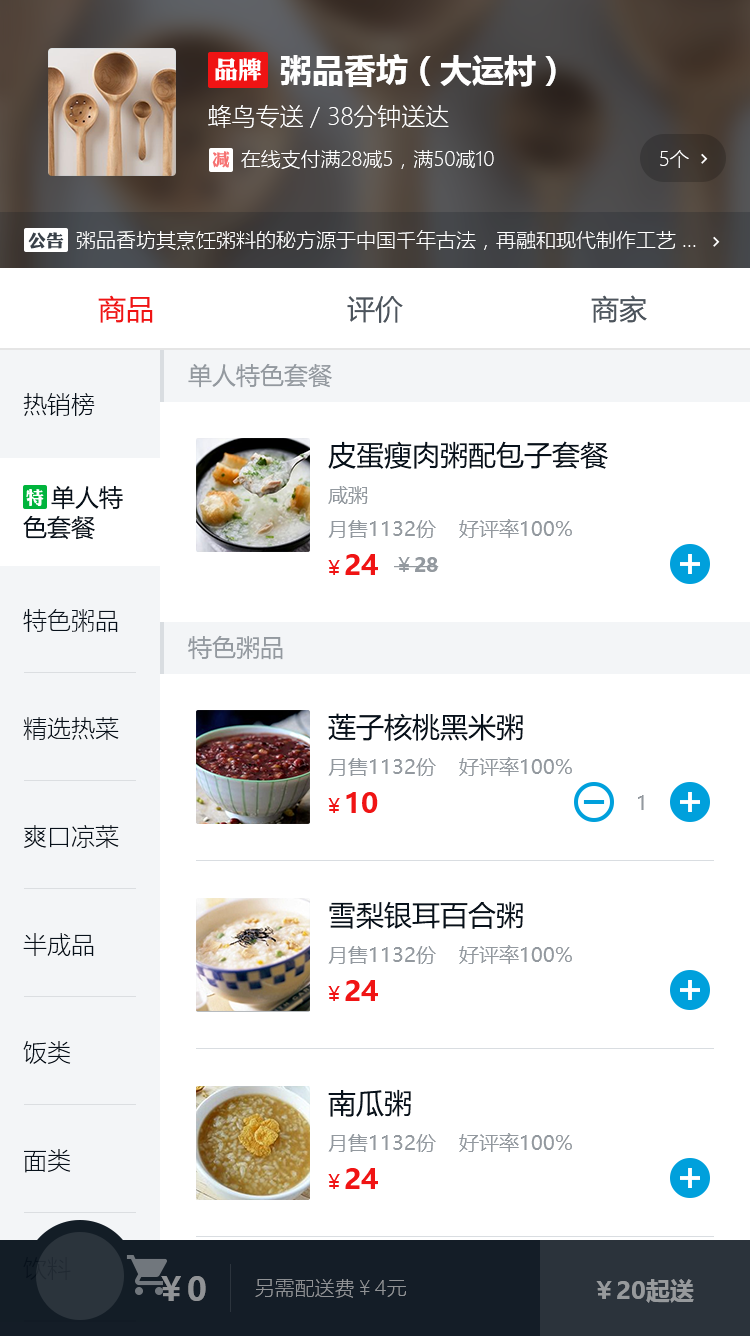
<style>
.page{position:relative;width:750px;height:1336px;background:#ffffff}
.page>*{position:absolute;margin:0}
.t1{font:32px "MicrosoftYaHei-Bold";color:#ffffff}
.t2{font:24px "MicrosoftYaHeiLight";color:#ffffff}
.t3{font:20px "MicrosoftYaHeiLight";color:#ffffff}
.t4{font:28px "MicrosoftYaHei";color:#f01414}
.t5{font:28px "MicrosoftYaHei";color:#4d555d}
.t6{font:24px "MicrosoftYaHei";color:#93999f}
.t7{font:24px "MicrosoftYaHeiLight";color:#07111b}
.t8{font:28px "MicrosoftYaHei";color:#07111b}
.t9{font:24px/28px "MicrosoftYaHei";color:#07111b}
.t10{font:20px "MicrosoftYaHei";color:#93999f}
.t11{font:28px "MicrosoftYaHei-Bold";color:#f01414}
.t12{font:20px "MicrosoftYaHei";color:#f01414}
.t13{font:20px "MicrosoftYaHei-Bold";color:#93999f}
.t14{font:32px "MicrosoftYaHei-Bold";color:#919396}
.t15{font:20px "MicrosoftYaHeiLight";color:#919396}
.t16{font:24px "MicrosoftYaHei-Bold";color:#979a9c}
</style>
<div class="page">
<p class="t1" style="left:280px;top:54px;width:276px;height:33px">粥品香坊（大运村）</p>
<p class="t2" style="left:208px;top:105px;width:241px;height:23px">蜂鸟专送 / 38分钟送达</p>
<p class="t3" style="left:241px;top:150px;width:253px;height:19px">在线支付满28减5，满50减10</p>
<p class="t3" style="left:660px;top:150px;width:29px;height:18px">5个</p>
<p class="t3" style="left:76px;top:230px;width:620px;height:20px">粥品香坊其烹饪粥料的秘方源于中国千年古法，再融和现代制作工艺 ...</p>
<p class="t4" style="left:98px;top:295px;width:55px;height:28px">商品</p>
<p class="t5" style="left:347px;top:296px;width:56px;height:27px">评价</p>
<p class="t5" style="left:591px;top:295px;width:56px;height:28px">商家</p>
<p class="t6" style="left:188px;top:363px;width:144px;height:25px">单人特色套餐</p>
<p class="t7" style="left:23px;top:393px;width:72px;height:23px">热销榜</p>
<p class="t8" style="left:328px;top:441px;width:280px;height:28px">皮蛋瘦肉粥配包子套餐</p>
<p class="t9" style="left:23px;top:486px;width:100px;height:54px">单人特<br>色套餐</p>
<p class="t10" style="left:328px;top:486px;width:40px;height:18px">咸粥</p>
<p class="t10" style="left:328px;top:520px;width:108px;height:18px">月售1132份</p>
<p class="t10" style="left:459px;top:519px;width:113px;height:19px">好评率100%</p>
<p class="t11" style="left:328px;top:554px;width:50px;height:21px"><span class="t12">￥</span>24</p>
<p class="t13" style="left:394px;top:557px;width:45px;height:15px"><span class="t10">￥</span>28</p>
<p class="t7" style="left:23px;top:609px;width:95px;height:23px">特色粥品</p>
<p class="t6" style="left:188px;top:635px;width:95px;height:25px">特色粥品</p>
<p class="t8" style="left:328px;top:713px;width:195px;height:28px">莲子核桃黑米粥</p>
<p class="t7" style="left:23px;top:717px;width:96px;height:23px">精选热菜</p>
<p class="t10" style="left:328px;top:758px;width:108px;height:18px">月售1132份</p>
<p class="t10" style="left:459px;top:757px;width:113px;height:19px">好评率100%</p>
<p class="t11" style="left:328px;top:792px;width:50px;height:21px"><span class="t12">￥</span>10</p>
<p class="t10" style="left:638px;top:795px;width:6px;height:15px">1</p>
<p class="t7" style="left:24px;top:825px;width:95px;height:23px">爽口凉菜</p>
<p class="t8" style="left:329px;top:901px;width:194px;height:28px">雪梨银耳百合粥</p>
<p class="t7" style="left:23px;top:933px;width:71px;height:23px">半成品</p>
<p class="t10" style="left:328px;top:946px;width:108px;height:18px">月售1132份</p>
<p class="t10" style="left:459px;top:945px;width:113px;height:19px">好评率100%</p>
<p class="t11" style="left:328px;top:980px;width:50px;height:21px"><span class="t12">￥</span>24</p>
<p class="t7" style="left:23px;top:1041px;width:48px;height:23px">饭类</p>
<p class="t8" style="left:328px;top:1089px;width:83px;height:28px">南瓜粥</p>
<p class="t10" style="left:328px;top:1134px;width:108px;height:18px">月售1132份</p>
<p class="t10" style="left:459px;top:1133px;width:113px;height:19px">好评率100%</p>
<p class="t7" style="left:24px;top:1149px;width:47px;height:24px">面类</p>
<p class="t11" style="left:328px;top:1168px;width:50px;height:21px"><span class="t12">￥</span>24</p>
<p class="t14" style="left:161px;top:1276px;width:45px;height:25px">￥0</p>
<p class="t15" style="left:255px;top:1279px;width:151px;height:19px">另需配送费￥4元</p>
<p class="t16" style="left:596px;top:1279px;width:98px;height:24px">￥20起送</p>
</div>
